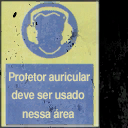
<style>
.page{position:relative;width:128px;height:128px}
.page>*{position:absolute;margin:0}
.t1{font:12px "Helvetica-Narrow-Bold";letter-spacing:-0.02em;color:#dedbad;scale:1.04 1}
.t2{font:12px "Helvetica-Narrow-Bold";letter-spacing:-0.02em;color:#dedbad;scale:1.07 1}
.t3{font:12px "Helvetica-Narrow-Bold";letter-spacing:-0.02em;color:#dedbad;scale:1.08 1}
</style>
<div class="page">
<p class="t1" style="left:9px;top:72px;width:81px;height:10px">Protetor auricular</p>
<p class="t2" style="left:11px;top:90px;width:74px;height:10px">deve ser usado</p>
<p class="t3" style="left:22px;top:109px;width:52px;height:10px">nessa área</p>
</div>
